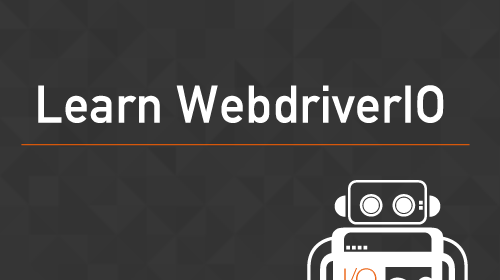
<style>
.page{position:relative;width:500px;height:280px;background:#353535}
.page>*{position:absolute;margin:0}
.t1{font:52px "DINAlternate-Bold";color:#ffffff}
</style>
<div class="page">
<p class="t1" style="left:38px;top:85px;width:406px;height:38px">Learn WebdriverIO</p>
</div>
